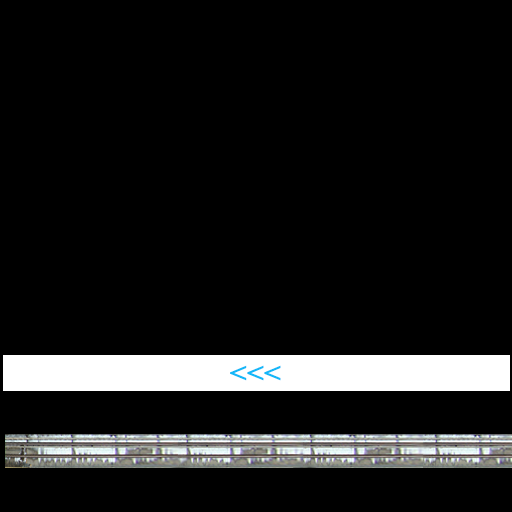
<style>
.page{position:relative;width:512px;height:512px;background:#000000}
.page>*{position:absolute;margin:0}
.t1{font:30px "TimesNewRomanPS-BoldMT";color:#13b8f8}
</style>
<div class="page">
<p class="t1" style="left:230px;top:365px;width:51px;height:16px">&lt;&lt;&lt;</p>
</div>
